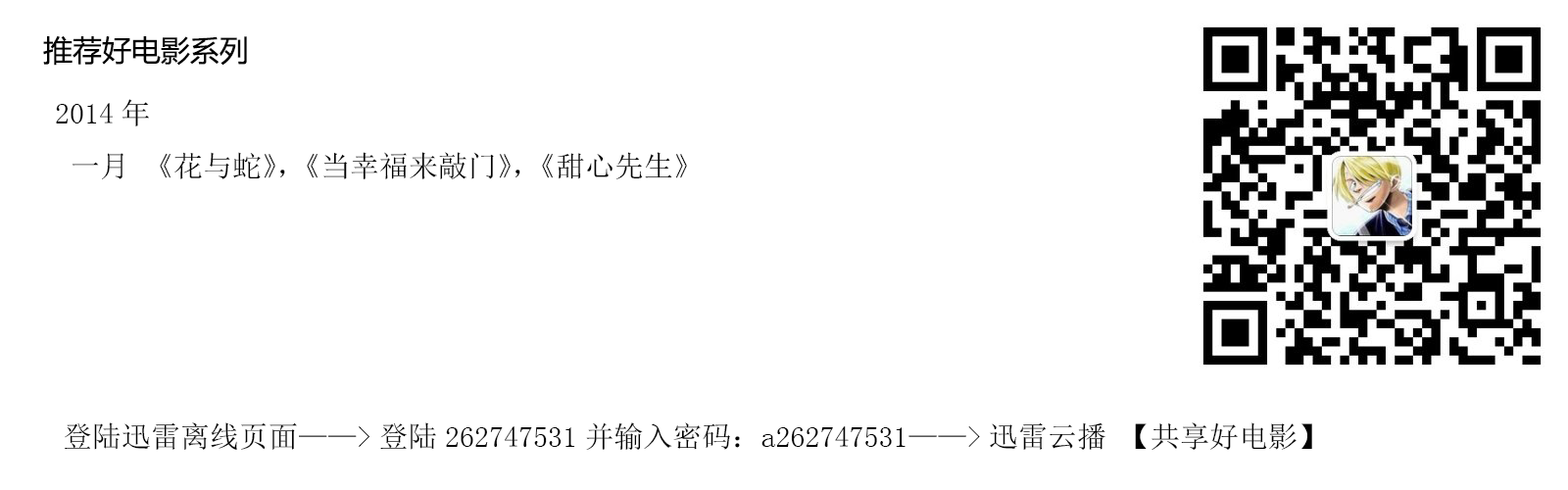
<style>
.page{position:relative;width:1568px;height:490px;background:#ffffff}
.page>*{position:absolute;margin:0}
.t1{font:29.4px "MicrosoftYaHei";color:#020202}
.t2{font:29.4px "SimSun";color:#020202}
</style>
<div class="page">
<p class="t1" style="left:43px;top:35px;width:204px;height:31px">推荐好电影系列</p>
<p class="t2" style="left:56px;top:99px;width:93px;height:27px">2014年</p>
<p class="t2" style="left:72px;top:152px;width:615px;height:27px">一月  《花与蛇》，《当幸福来敲门》，《甜心先生》</p>
<p class="t2" style="left:64px;top:422px;width:1248px;height:28px">登陆迅雷离线页面——&gt;登陆262747531并输入密码：a262747531——&gt;迅雷云播  【共享好电影】</p>
</div>
